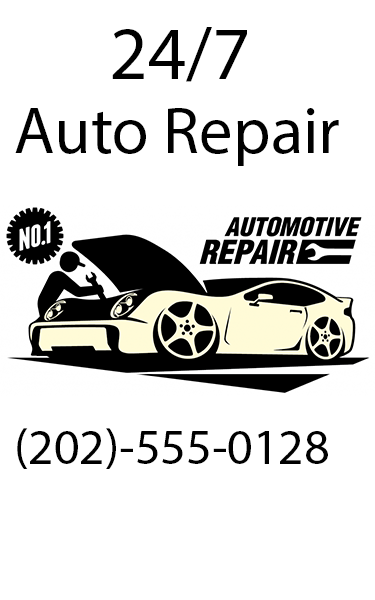
<style>
.page{position:relative;width:375px;height:600px;background:#ffffff}
.page>*{position:absolute;margin:0}
.t1{font:75px "MyriadPro-Regular";color:#000000}
.t2{font:66.7px "MyriadPro-Regular";color:#000000}
.t3{font:50px "MyriadPro-Regular";color:#000000}
</style>
<div class="page">
<p class="t1" style="left:112px;top:27px;width:135px;height:55px">24/7</p>
<p class="t2" style="left:15px;top:108px;width:324px;height:58px">Auto Repair</p>
<p class="t3" style="left:17px;top:428px;width:311px;height:41px">(202)-555-0128</p>
</div>
